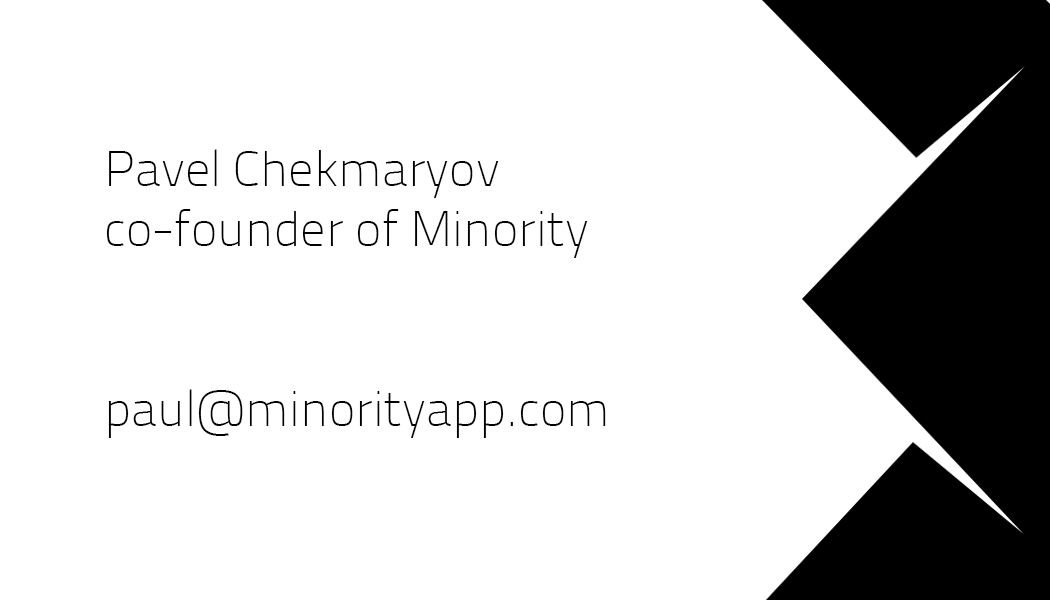
<style>
.page{position:relative;width:1050px;height:600px;background:#ffffff}
.page>*{position:absolute;margin:0}
.t1{font:12px "TitilliumText25L-1wt";color:#000000}
</style>
<div class="page">
<p class="t1" style="left:106px;top:149px;width:500px;height:289px">Pavel Chekmaryov<br>co-founder of Minority<br><br><br>paul@minorityapp.com</p>
</div>
